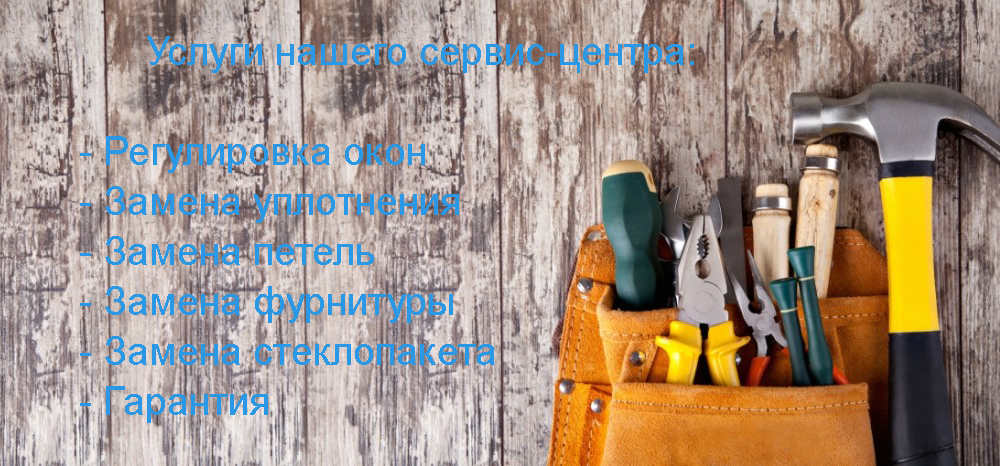
<style>
.page{position:relative;width:1000px;height:466px}
.page>*{position:absolute;margin:0}
.t1{font:40px/50px "ArialMT";color:#2a98e5}
</style>
<div class="page">
<p class="t1" style="left:80px;top:36px;width:614px;height:387px">Услуги нашего сервис-центра:<br><br>- Регулировка окон<br>- Замена уплотнения<br>- Замена петель<br>- Замена фурнитуры<br>- Замена стеклопакета<br>- Гарантия</p>
</div>
